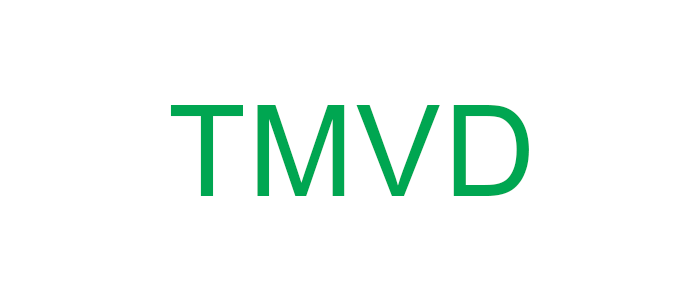
<style>
.page{position:relative;width:700px;height:300px;background:#ffffff}
.page>*{position:absolute;margin:0}
.t1{font:127px "ArialMT";letter-spacing:0.02em;color:#00a651}
</style>
<div class="page">
<p class="t1" style="left:170px;top:105px;width:359px;height:91px">TMVD</p>
</div>
